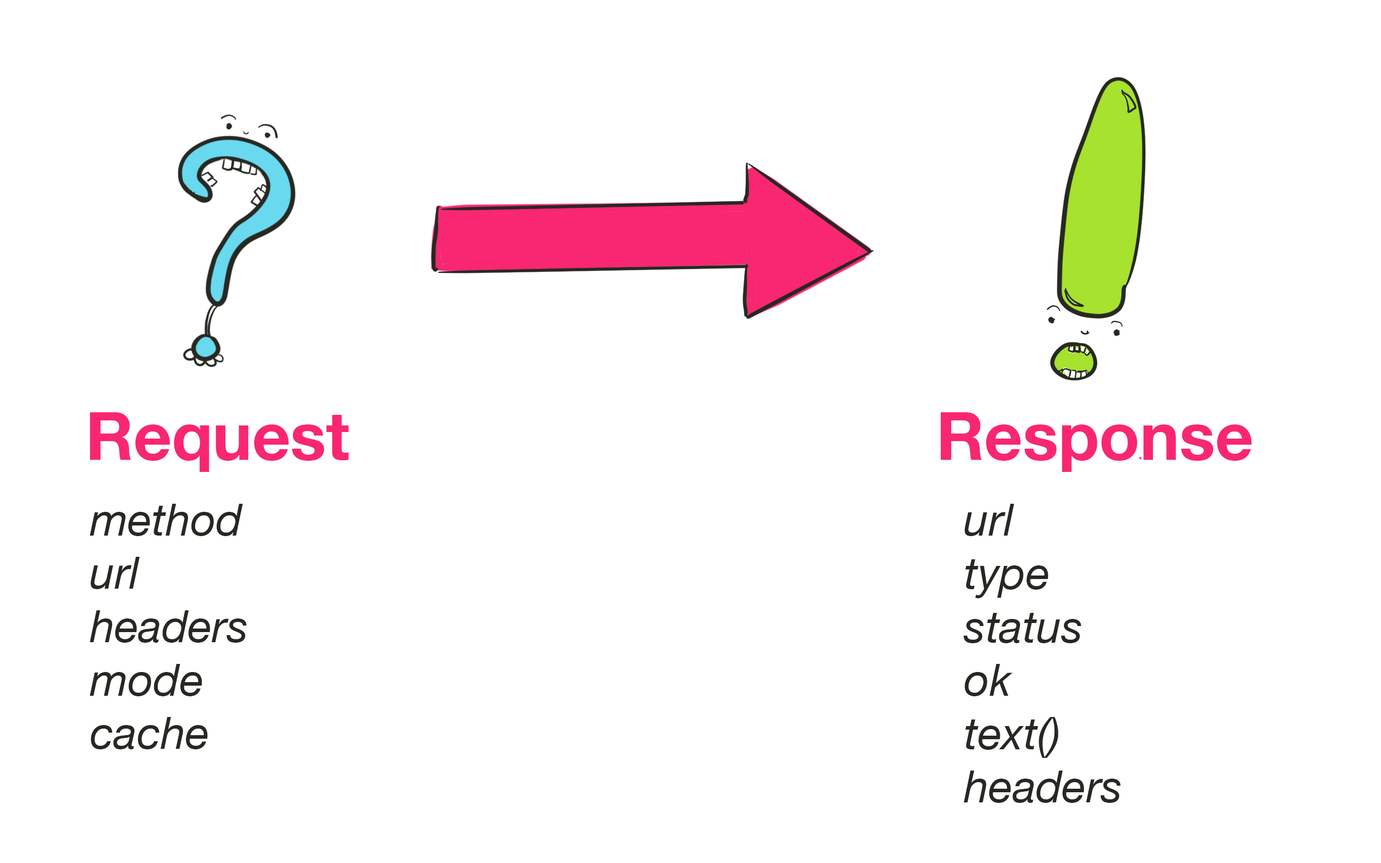
<style>
.page{position:relative;width:1381px;height:863px;background:#ffffff}
.page>*{position:absolute;margin:0}
.t1{font:66.7px "HelveticaNeue-Bold";color:#f92672}
.t2{font:44.5px "HelveticaNeue-Italic";color:#272822}
</style>
<div class="page">
<p class="t1" style="left:90px;top:412px;width:259px;height:60px">Request</p>
<p class="t1" style="left:941px;top:412px;width:311px;height:60px">Response</p>
<p class="t2" style="left:89px;top:504px;width:158px;height:246px">method<br>url<br>headers<br>mode<br>cache</p>
<p class="t2" style="left:964px;top:504px;width:157px;height:299px">url<br>type<br>status<br>ok<br>text()<br>headers</p>
</div>
